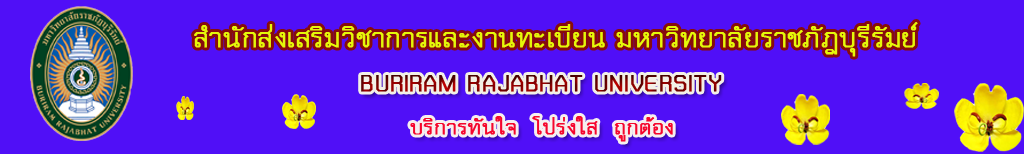
<style>
.page{position:relative;width:1024px;height:154px;background:#500ff7}
.page>*{position:absolute;margin:0}
.t1{font:37.5px "THChakraPetch";color:#e4f809;font-weight:bold}
.t2{font:37.5px "THChakraPetch";font-weight:bold}
.t3{font:29.2px "THChakraPetch";color:#f5062d;font-weight:bold}
</style>
<div class="page">
<p class="t1" style="left:194px;top:22px;width:724px;height:35px">สำนักส่งเสริมวิชาการและงานทะเบียน มหาวิทยาลัยราชภัฎบุรีรัมย์</p>
<p class="t2" style="left:361px;top:75px;width:361px;height:17px">BURIRAM RAJABHAT UNIVERSITY</p>
<p class="t3" style="left:410px;top:116px;width:263px;height:26px">บริการทันใจ  โปร่งใส  ถูกต้อง</p>
</div>
